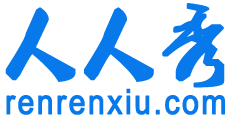
<style>
.page{position:relative;width:230px;height:120px;background:#ffffff}
.page>*{position:absolute;margin:0}
.t1{font:82.8px "2.0-";letter-spacing:0.06em;color:#0779eb;font-weight:bold;scale:0.87 1}
.t2{font:34.5px "ArialMT";letter-spacing:0.06em;color:#0779eb;font-weight:bold;scale:0.87 1}
</style>
<div class="page">
<p class="t1" style="left:5px;top:3px;width:220px;height:85px">人人秀</p>
<p class="t2" style="left:6px;top:88px;width:219px;height:27px">renrenxiu.com</p>
</div>
